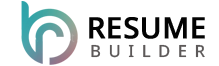
<style>
.page{position:relative;width:219px;height:66px;background:#ffffff}
.page>*{position:absolute;margin:0}
.t1{font:29.2px "NotoSans-Medium";color:#030303;font-weight:bold}
.t2{font:16.7px "NotoSans-Medium";letter-spacing:0.45em;color:#5e5959}
</style>
<div class="page">
<p class="t1" style="left:89px;top:17px;width:116px;height:22px">RESUME</p>
<p class="t2" style="left:91px;top:44px;width:114px;height:14px">BUILDER</p>
</div>
